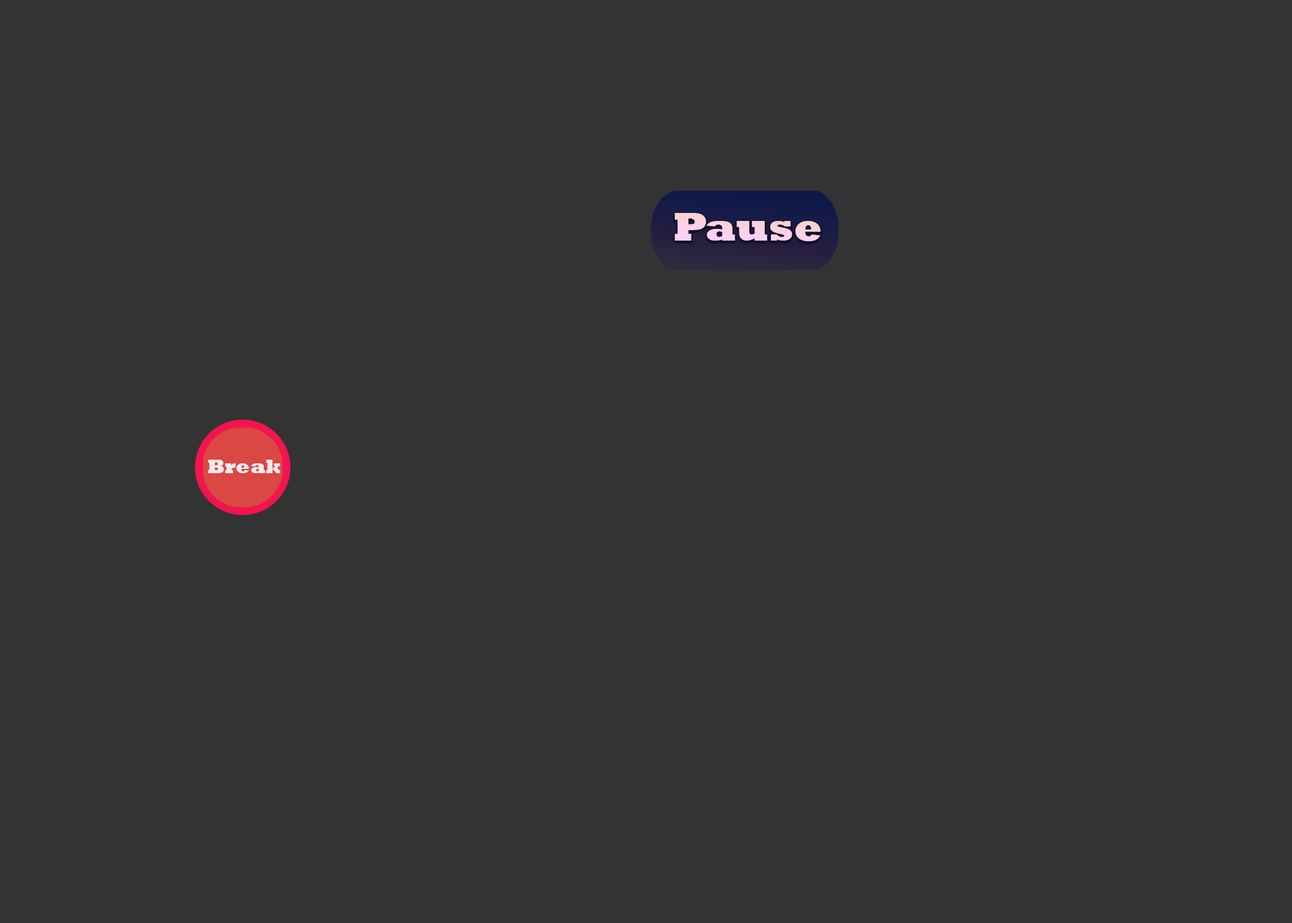
<style>
.page{position:relative;width:1292px;height:923px;background:#333333}
.page>*{position:absolute;margin:0}
.t1{font:41px "Rockwell-ExtraBold";color:#fdd1e6}
.t2{font:20.5px "Rockwell-ExtraBold";color:#f5eaed}
</style>
<div class="page">
<p class="t1" style="left:674px;top:213px;width:147px;height:28px">Pause</p>
<p class="t2" style="left:208px;top:460px;width:73px;height:13px">Break</p>
</div>
